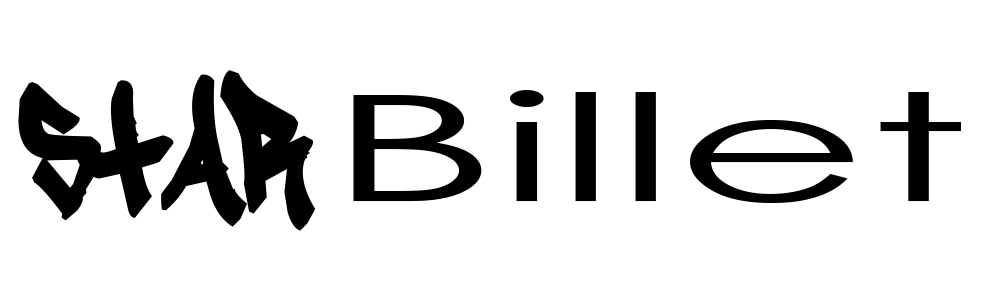
<style>
.page{position:relative;width:1000px;height:300px;background:#ffffff}
.page>*{position:absolute;margin:0}
.t1{font:206.3px "Tagster";color:#000000}
.t2{font:147.9px "CenturyGothic";color:#000000;scale:2.01 1}
</style>
<div class="page">
<p class="t1" style="left:18px;top:70px;width:298px;height:161px">Star</p>
<p class="t2" style="left:353px;top:90px;width:608px;height:113px">Billet</p>
</div>
